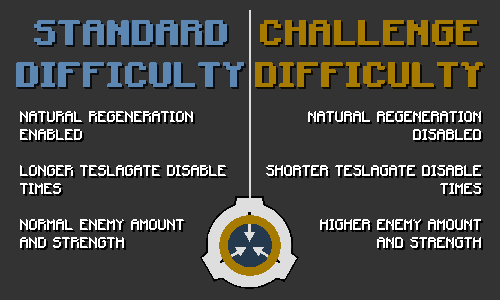
<style>
.page{position:relative;width:500px;height:300px;background:#333333}
.page>*{position:absolute;margin:0}
.t1{font:35px "Minecraft-Bold";color:#5c87b2}
.t2{font:35px "Minecraft-Bold";color:#a77b00}
.t3{font:15px "Minecraft-Regular";color:#ffffff}
</style>
<div class="page">
<p class="t1" style="left:16px;top:20px;width:228px;height:67px;text-align:center">STANDARD<br>DIFFICULTY</p>
<p class="t1" style="left:16px;top:20px;width:228px;height:67px;text-align:center">STANDARD<br>DIFFICULTY</p>
<p class="t2" style="left:255px;top:20px;width:228px;height:67px;text-align:center">CHALLENGE<br>DIFFICULTY</p>
<p class="t2" style="left:255px;top:20px;width:228px;height:67px;text-align:center">CHALLENGE<br>DIFFICULTY</p>
<p class="t3" style="left:19px;top:111px;width:207px;height:137px">NATURAL REGENERATION ENABLED<br><br>LONGER TESLAGATE DISABLE TIMES<br><br>NORMAL ENEMY AMOUNT<br>AND STRENGTH</p>
<p class="t3" style="left:266px;top:111px;width:215px;height:137px;text-align:right">NATURAL REGENERATION DISABLED<br><br>SHORTER TESLAGATE DISABLE TIMES<br><br>HIGHER ENEMY AMOUNT<br>AND STRENGTH</p>
</div>
